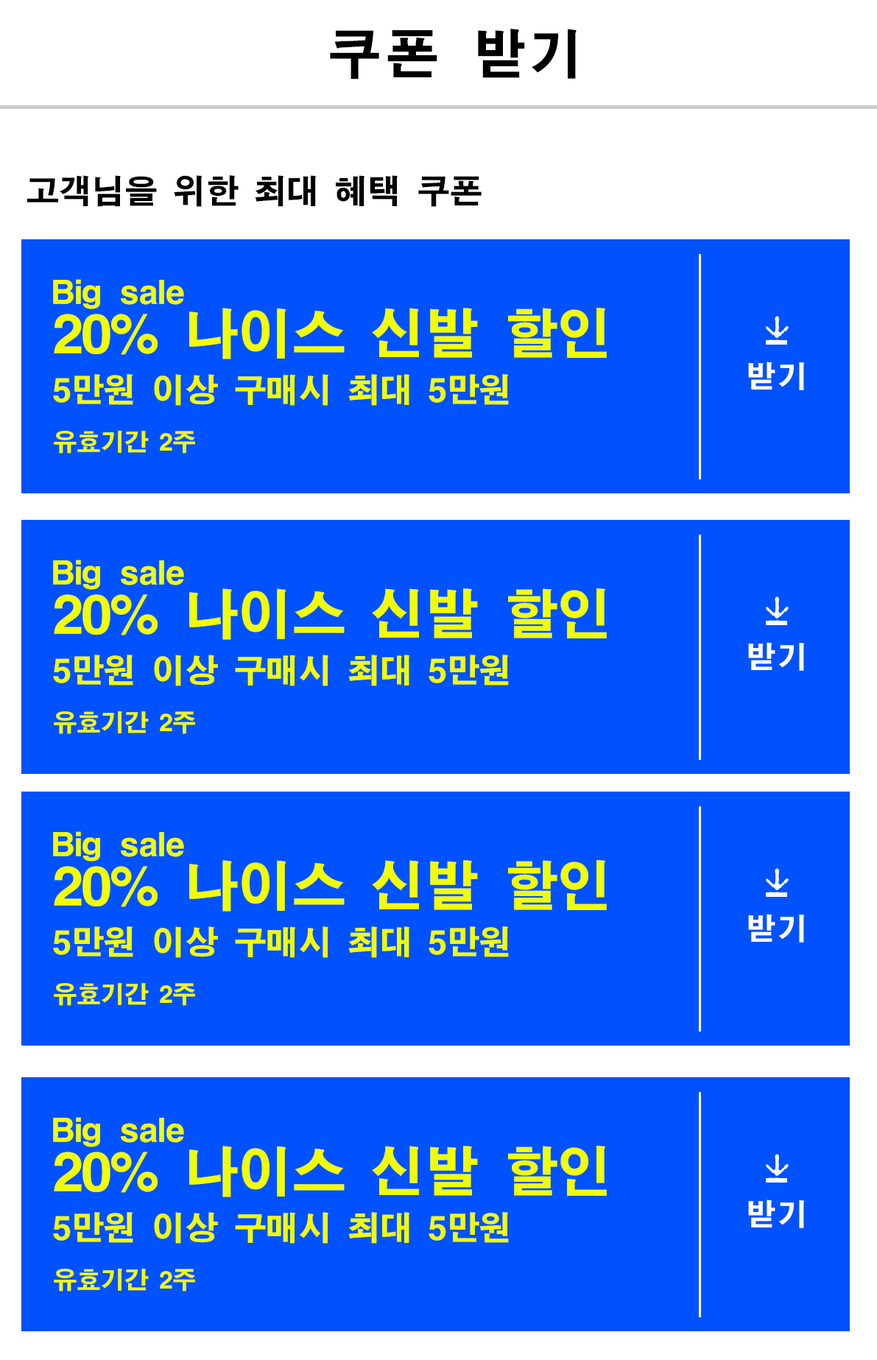
<style>
.page{position:relative;width:877px;height:1360px;background:#0052ff}
.page>*{position:absolute;margin:0}
.t1{font:54.5px "HJ°ßÃâ°íµñ";letter-spacing:0.04em;color:#000000}
.t2{font:33.7px "HJ°ßÃâ°íµñ";letter-spacing:-0.04em;color:#000000}
.t3{font:33.7px/48.6px "HJ°ßÃâ°íµñ";letter-spacing:-0.04em;color:#f0ff01}
.t4{font:33.7px/48.6px "HJ°ßÃâ°íµñ";letter-spacing:0.02em;color:#f0ff01}
.t5{font:55.2px/48.6px "HJ°ßÃâ°íµñ";letter-spacing:-0.04em;color:#f0ff01}
.t6{font:24.5px/48.6px "HJ°ßÃâ°íµñ";letter-spacing:-0.04em;color:#f0ff01}
.t7{font:30.7px "HJ°ßÃâ°íµñ";letter-spacing:0.04em;color:#ffffff}
.t8{font:33.7px/48.6px "HJ°ßÃâ°íµñ";letter-spacing:-0.04em;color:#f0ff00}
.t9{font:33.7px/48.6px "HJ°ßÃâ°íµñ";letter-spacing:0.02em;color:#f0ff00}
.t10{font:55.2px/48.6px "HJ°ßÃâ°íµñ";letter-spacing:-0.04em;color:#f0ff00}
.t11{font:24.5px/48.6px "HJ°ßÃâ°íµñ";letter-spacing:-0.04em;color:#f0ff00}
</style>
<div class="page">
<p class="t1" style="left:330px;top:28px;width:246px;height:52px">쿠폰 받기</p>
<p class="t2" style="left:27px;top:175px;width:455px;height:32px">고객님을 위한 최대 혜택 쿠폰</p>
<p class="t3" style="left:53px;top:279px;width:554px;height:175px"><span class="t4">Big sale<br></span><span class="t5">20% 나이스 신발 할인<br></span>5만원 이상 구매시 최대 5만원<br><span class="t6">유효기간 2주</span></p>
<p class="t7" style="left:748px;top:362px;width:56px;height:28px">받기</p>
<p class="t8" style="left:53px;top:560px;width:554px;height:174px"><span class="t9">Big sale<br></span><span class="t10">20% 나이스 신발 할인<br></span>5만원 이상 구매시 최대 5만원<br><span class="t11">유효기간 2주</span></p>
<p class="t7" style="left:748px;top:642px;width:56px;height:29px">받기</p>
<p class="t8" style="left:53px;top:831px;width:554px;height:175px"><span class="t9">Big sale<br></span><span class="t10">20% 나이스 신발 할인<br></span>5만원 이상 구매시 최대 5만원<br><span class="t11">유효기간 2주</span></p>
<p class="t7" style="left:748px;top:914px;width:56px;height:28px">받기</p>
<p class="t8" style="left:53px;top:1117px;width:554px;height:174px"><span class="t9">Big sale<br></span><span class="t10">20% 나이스 신발 할인<br></span>5만원 이상 구매시 최대 5만원<br><span class="t11">유효기간 2주</span></p>
<p class="t7" style="left:748px;top:1199px;width:56px;height:29px">받기</p>
</div>
